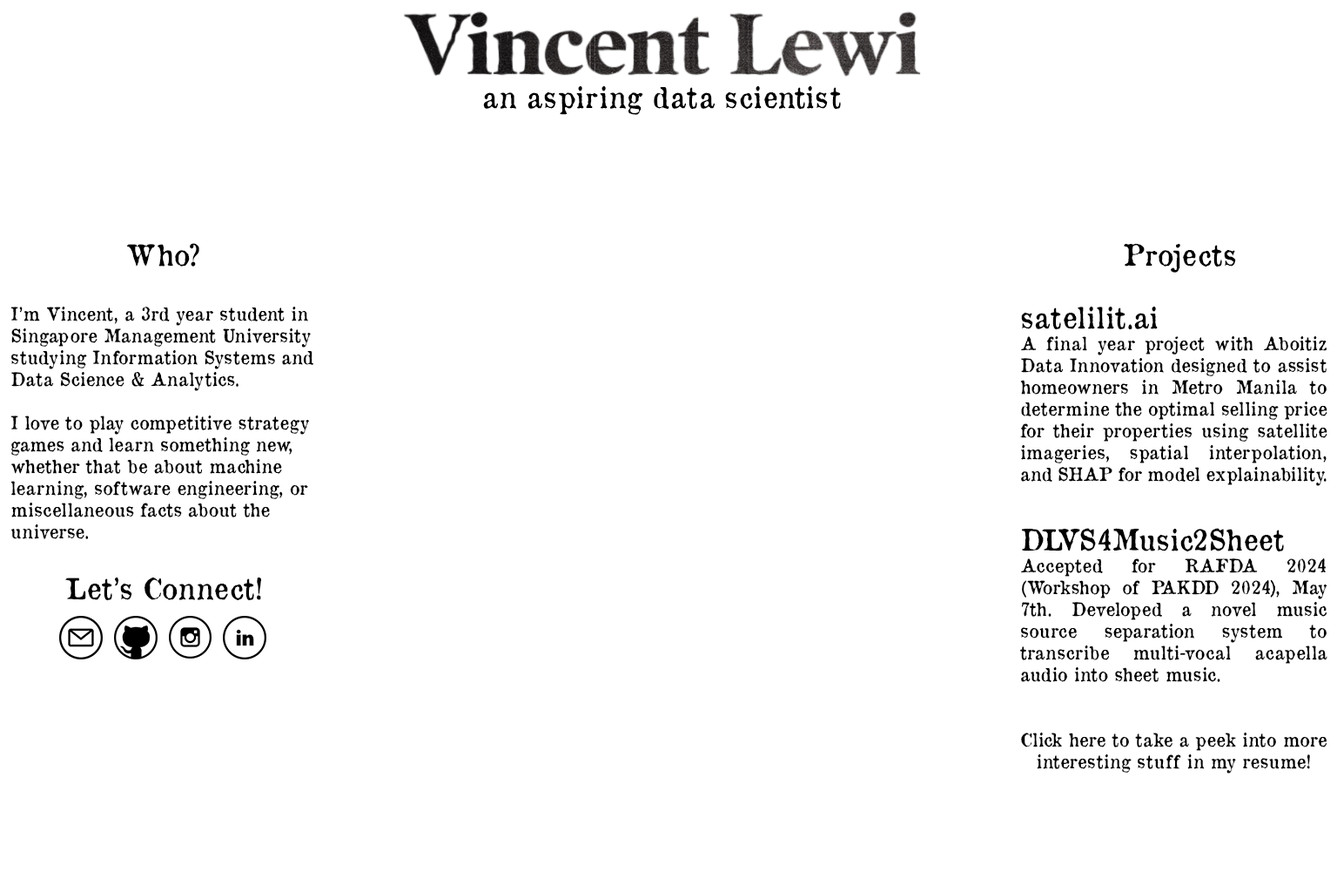
<style>
.page{position:relative;width:1337px;height:892px;background:#ffffff}
.page>*{position:absolute;margin:0}
.t1{font:29px "OldNewspaperTypes";color:#000000}
.t2{font:18.1px "OldNewspaperTypes";color:#000000}
</style>
<div class="page">
<p class="t1" style="left:483px;top:86px;width:358px;height:29px">an aspiring data scientist</p>
<p class="t1" style="left:127px;top:243px;width:72px;height:23px">Who?</p>
<p class="t1" style="left:1124px;top:243px;width:112px;height:30px">Projects</p>
<p class="t2" style="left:10px;top:306px;width:303px;height:233px">I’m Vincent, a 3rd year student in <br>Singapore Management University <br>studying Information Systems and <br>Data Science &amp; Analytics. <br><br>I love to play competitive strategy games and learn something new, whether that be about machine learning, software engineering, or miscellaneous facts about the universe.</p>
<p class="t2" style="left:1020px;top:306px;width:308px;height:467px;text-align:justify"><span class="t1">satelilit.ai<br></span>A final year project with Aboitiz Data Innovation designed to assist homeowners in Metro Manila to determine the optimal selling price for their properties using satellite imageries, spatial interpolation, and SHAP for model explainability.<br><span class="t1"><br>DLVS4Music2Sheet<br></span>Accepted for RAFDA 2024 (Workshop of PAKDD 2024), May 7th. Developed a novel music source separation system to transcribe multi-vocal acapella audio into sheet music.<br><br><br>Click here to take a peek into more interesting stuff in my resume!</p>
<p class="t1" style="left:65px;top:576px;width:196px;height:25px">Let’s Connect!</p>
</div>
